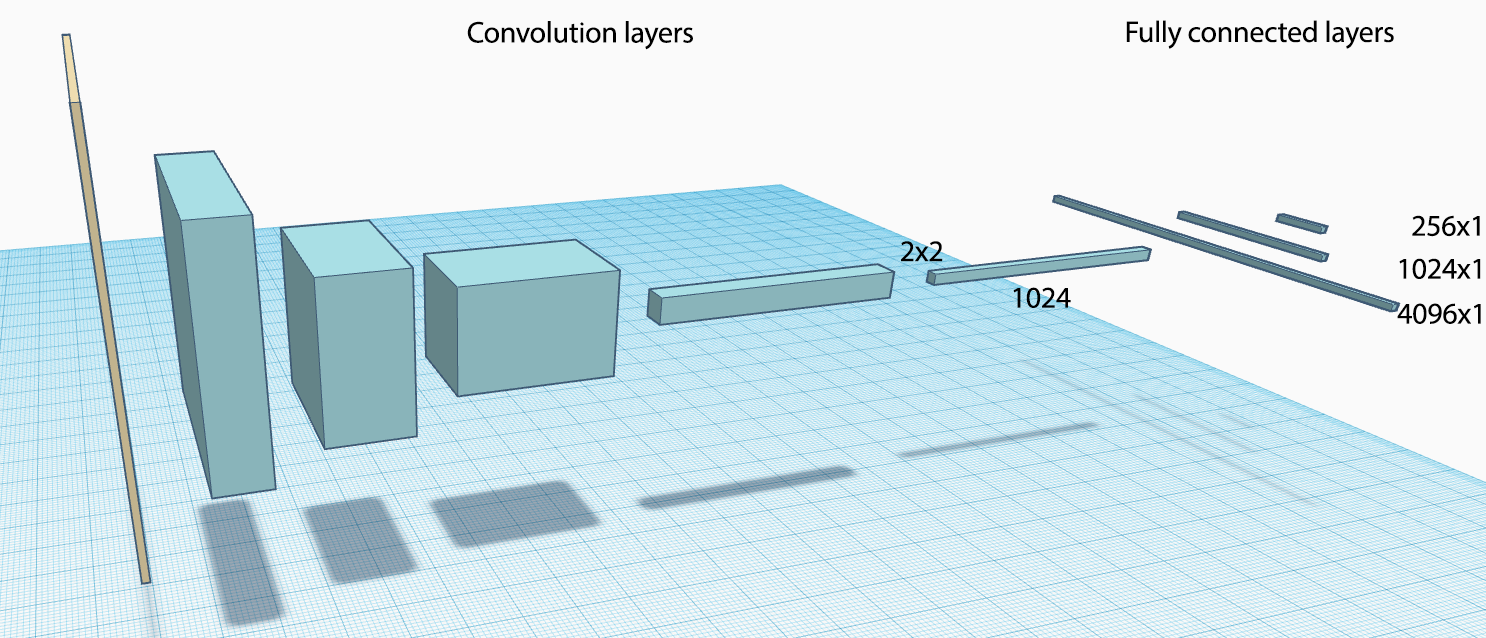
<style>
.page{position:relative;width:1486px;height:638px;background:#fafafa}
.page>*{position:absolute;margin:0}
.t1{font:30px "MyriadPro-Regular";letter-spacing:-0.01em;color:#000000}
</style>
<div class="page">
<p class="t1" style="left:467px;top:21px;width:226px;height:29px">Convolution layers</p>
<p class="t1" style="left:1126px;top:20px;width:268px;height:29px">Fully connected layers</p>
<p class="t1" style="left:1412px;top:215px;width:68px;height:22px">256x1</p>
<p class="t1" style="left:901px;top:241px;width:42px;height:21px">2x2</p>
<p class="t1" style="left:1399px;top:258px;width:82px;height:21px">1024x1</p>
<p class="t1" style="left:1013px;top:287px;width:58px;height:21px">1024</p>
<p class="t1" style="left:1397px;top:303px;width:84px;height:21px">4096x1</p>
</div>
